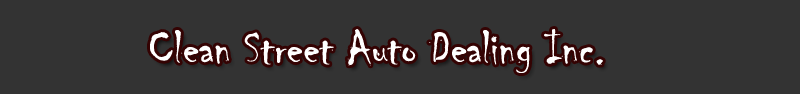
<style>
.page{position:relative;width:800px;height:94px;background:#333333}
.page>*{position:absolute;margin:0}
.t1{font:48.9px "Chiller-Regular";color:#ffffff}
</style>
<div class="page">
<p class="t1" style="left:150px;top:29px;width:453px;height:44px">Clean Street Auto Dealing Inc.</p>
</div>
